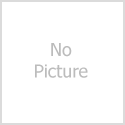
<style>
.page{position:relative;width:125px;height:125px;background:#ffffff}
.page>*{position:absolute;margin:0}
.t1{font:18px "Tahoma";color:#bcbcbc}
</style>
<div class="page">
<p class="t1" style="left:35px;top:43px;width:53px;height:35px;text-align:center">No<br>Picture</p>
</div>
